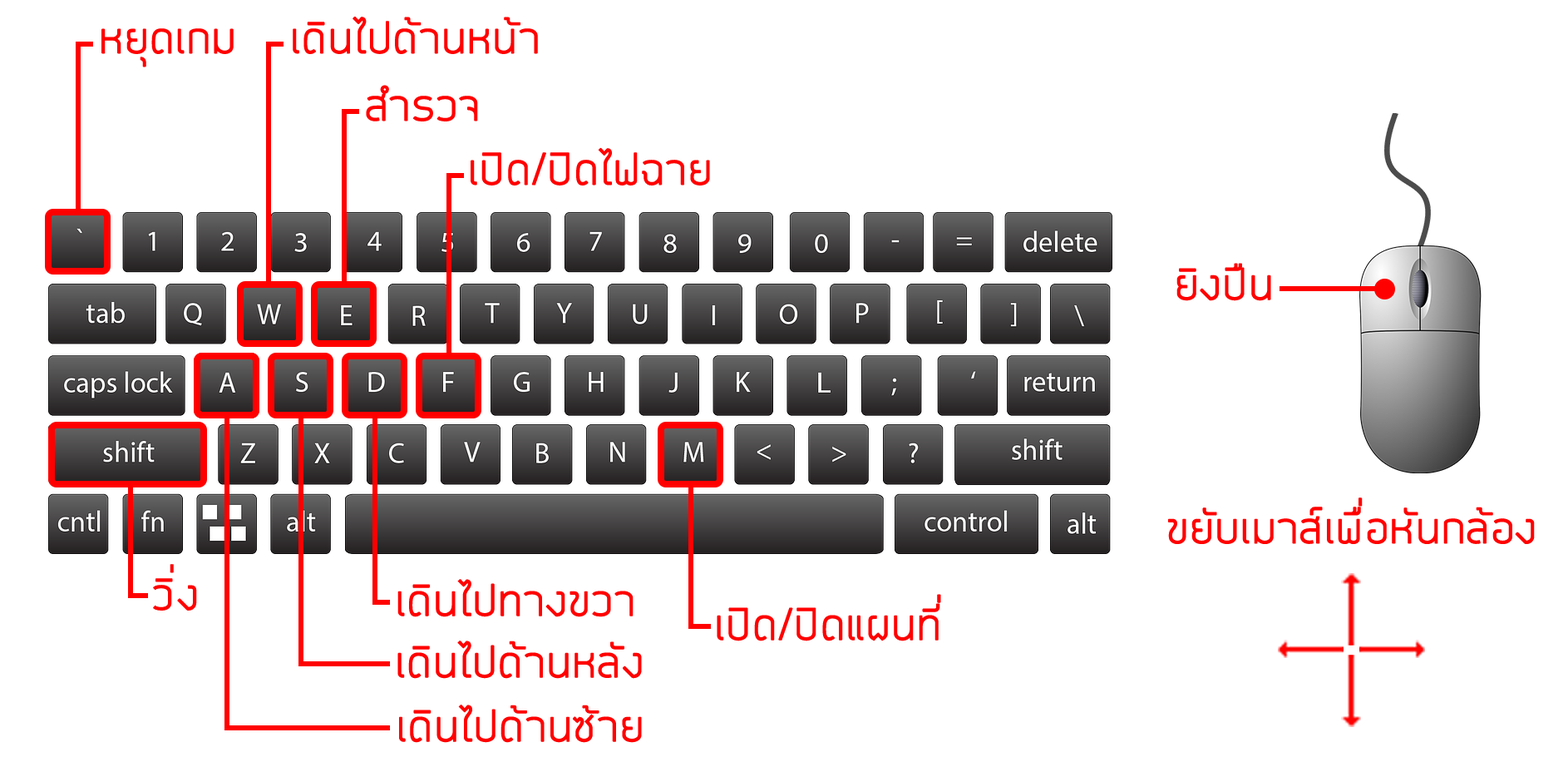
<style>
.page{position:relative;width:1568px;height:757px;background:#ffffff}
.page>*{position:absolute;margin:0}
.t1{font:39.9px "EkkamaiNew-Regular";color:#ff0000;font-weight:bold}
</style>
<div class="page">
<p class="t1" style="left:293px;top:17px;width:245px;height:37px">เดินไปด้านหน้า</p>
<p class="t1" style="left:101px;top:28px;width:133px;height:39px">หยุดเกม</p>
<p class="t1" style="left:366px;top:85px;width:112px;height:36px">สำรวจ</p>
<p class="t1" style="left:471px;top:147px;width:239px;height:38px">เปิด/ปิดไฟฉาย</p>
<p class="t1" style="left:1176px;top:263px;width:95px;height:38px">ยิงปืน</p>
<p class="t1" style="left:1168px;top:497px;width:367px;height:47px">ขยับเมาส์เพื่อหันกล้อง</p>
<p class="t1" style="left:153px;top:564px;width:44px;height:46px">วิ่ง</p>
<p class="t1" style="left:397px;top:579px;width:237px;height:38px">เดินไปทางขวา</p>
<p class="t1" style="left:717px;top:594px;width:224px;height:47px">เปิด/ปิดแผนที่</p>
<p class="t1" style="left:397px;top:640px;width:245px;height:38px">เดินไปด้านหลัง</p>
<p class="t1" style="left:399px;top:704px;width:243px;height:38px">เดินไปด้านซ้าย</p>
</div>
